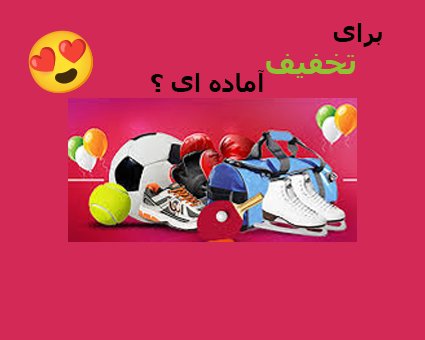
<style>
.page{position:relative;width:425px;height:340px;background:#d32956}
.page>*{position:absolute;margin:0}
.t1{font:24px "Tahoma-Bold";color:#000000}
.t2{font:24px "MyriadPro-Regular";color:#d32956}
.t3{font:24px "MyriadPro-Regular";color:#000000}
.t4{font:30px "Tahoma-Bold";color:#8dc532}
</style>
<div class="page">
<p class="t1" style="left:319px;top:23px;width:63px;height:24px"><span class="t2">f</span><span class="t3">f</span>برای</p>
<p class="t4" style="left:266px;top:54px;width:89px;height:24px">تخفیف</p>
<p class="t1" style="left:151px;top:70px;width:113px;height:22px">آماده ای ؟</p>
</div>
